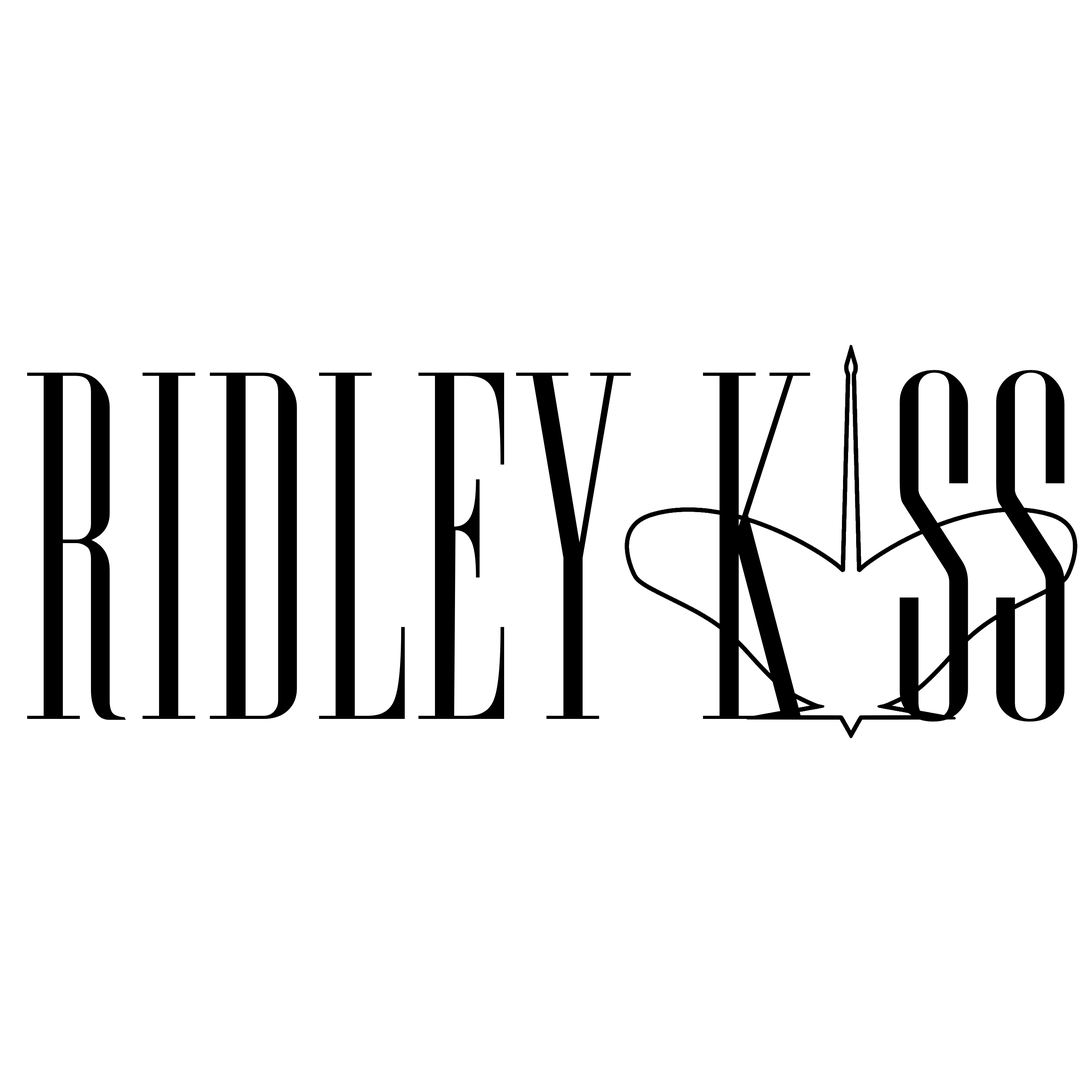
<style>
.page{position:relative;width:1092px;height:1092px;background:#ffffff}
.page>*{position:absolute;margin:0}
.t1{font:446.2px "Edition-Regular";color:#000000}
</style>
<div class="page">
<p class="t1" style="left:27px;top:370px;width:1038px;height:352px">RIDLEY K SS</p>
</div>
